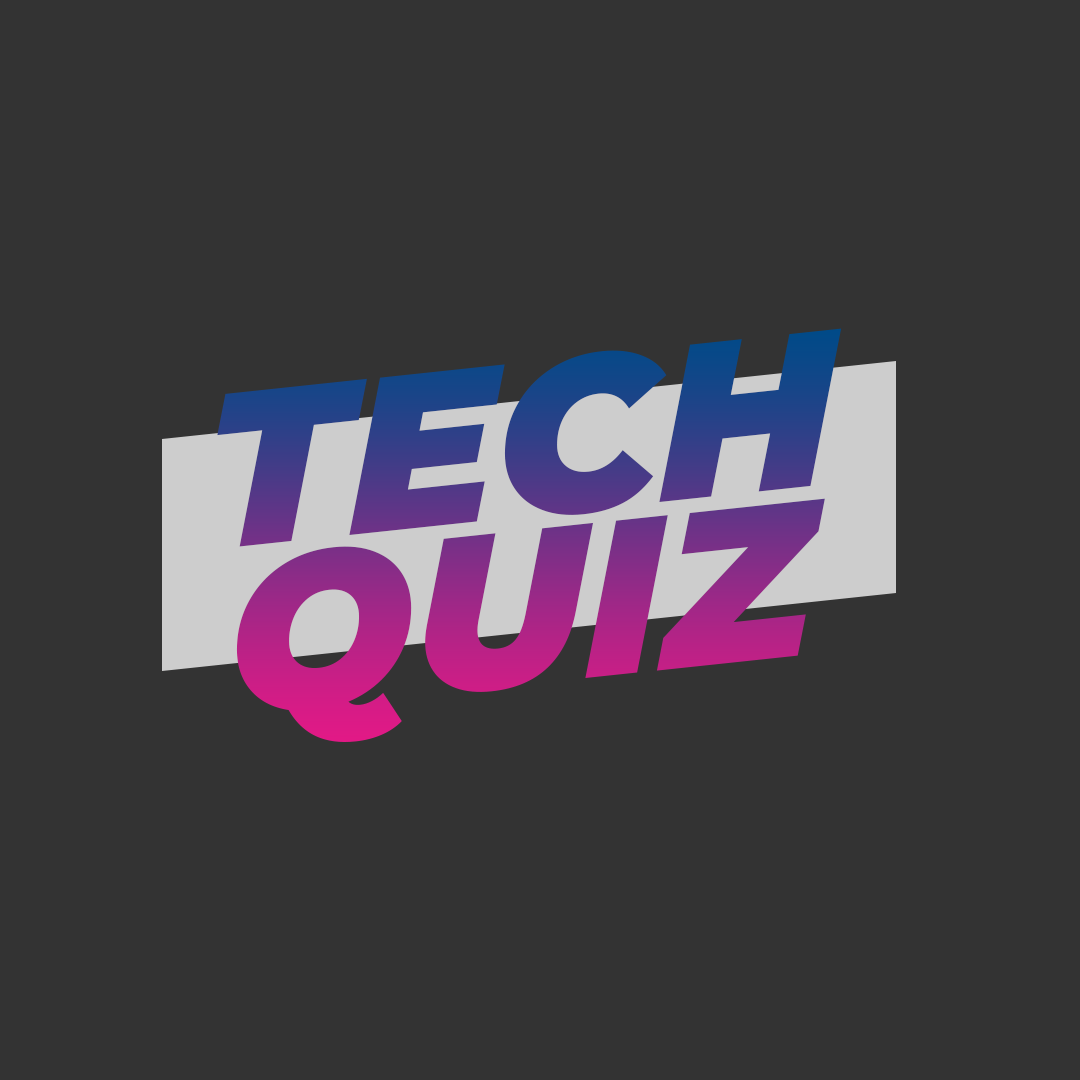
<style>
.page{position:relative;width:1080px;height:1080px;background:#333333}
.page>*{position:absolute;margin:0}
.t1{font:220px/168px "Montserrat-BlackItalic";text-transform:uppercase}
</style>
<div class="page">
<p class="t1" style="left:217px;top:328px;width:625px;height:414px;text-align:center;rotate:-6deg">tech<br>quiz</p>
</div>
